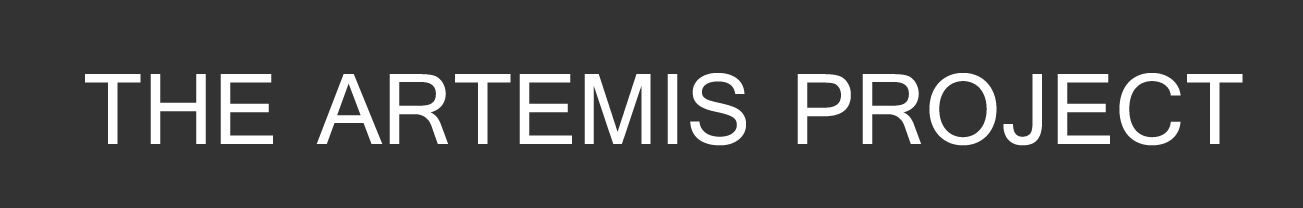
<style>
.page{position:relative;width:1303px;height:208px;background:#333333}
.page>*{position:absolute;margin:0}
.t1{font:125px "Tunga";color:#ffffff}
</style>
<div class="page">
<p class="t1" style="left:85px;top:73px;width:1158px;height:73px">THE ARTEMIS PROJECT</p>
</div>
